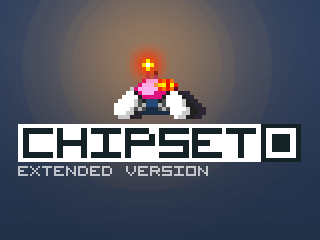
<style>
.page{position:relative;width:320px;height:240px}
.page>*{position:absolute;margin:0}
.t1{font:78px "VisitorTT2BRK";color:#1f2e33;text-transform:uppercase}
.t2{font:78px "VisitorTT2BRK";color:#ffffff;text-transform:uppercase}
.t3{font:20px "VisitorTT1BRK";color:#c4c6cb;text-transform:uppercase}
</style>
<div class="page">
<p class="t1" style="left:23px;top:128px;width:233px;height:30px">CHIPSET</p>
<p class="t2" style="left:266px;top:128px;width:30px;height:30px">0</p>
<p class="t3" style="left:18px;top:166px;width:190px;height:10px">extended version</p>
</div>
